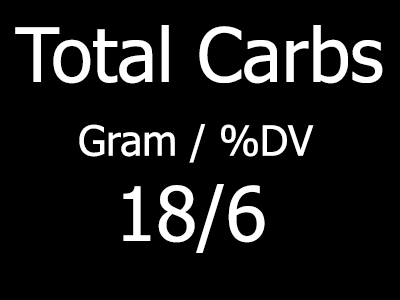
<style>
.page{position:relative;width:400px;height:300px;background:#000000}
.page>*{position:absolute;margin:0}
.t1{font:75px "Tahoma";color:#ffffff}
.t2{font:41.7px "Tahoma";color:#ffffff}
</style>
<div class="page">
<p class="t1" style="left:15px;top:25px;width:368px;height:59px">Total Carbs</p>
<p class="t2" style="left:79px;top:124px;width:235px;height:39px">Gram / %DV</p>
<p class="t1" style="left:123px;top:184px;width:142px;height:69px">18/6</p>
</div>
